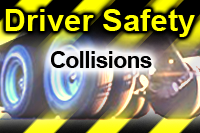
<style>
.page{position:relative;width:200px;height:133px}
.page>*{position:absolute;margin:0}
.t1{font:31.1px "Arial-BoldMT";color:#ffff00}
.t2{font:22.5px "Arial-BoldMT";letter-spacing:-0.025em;color:#000000}
</style>
<div class="page">
<p class="t1" style="left:5px;top:9px;width:190px;height:28px">Driver Safety</p>
<p class="t2" style="left:51px;top:51px;width:101px;height:17px">Collisions</p>
</div>
